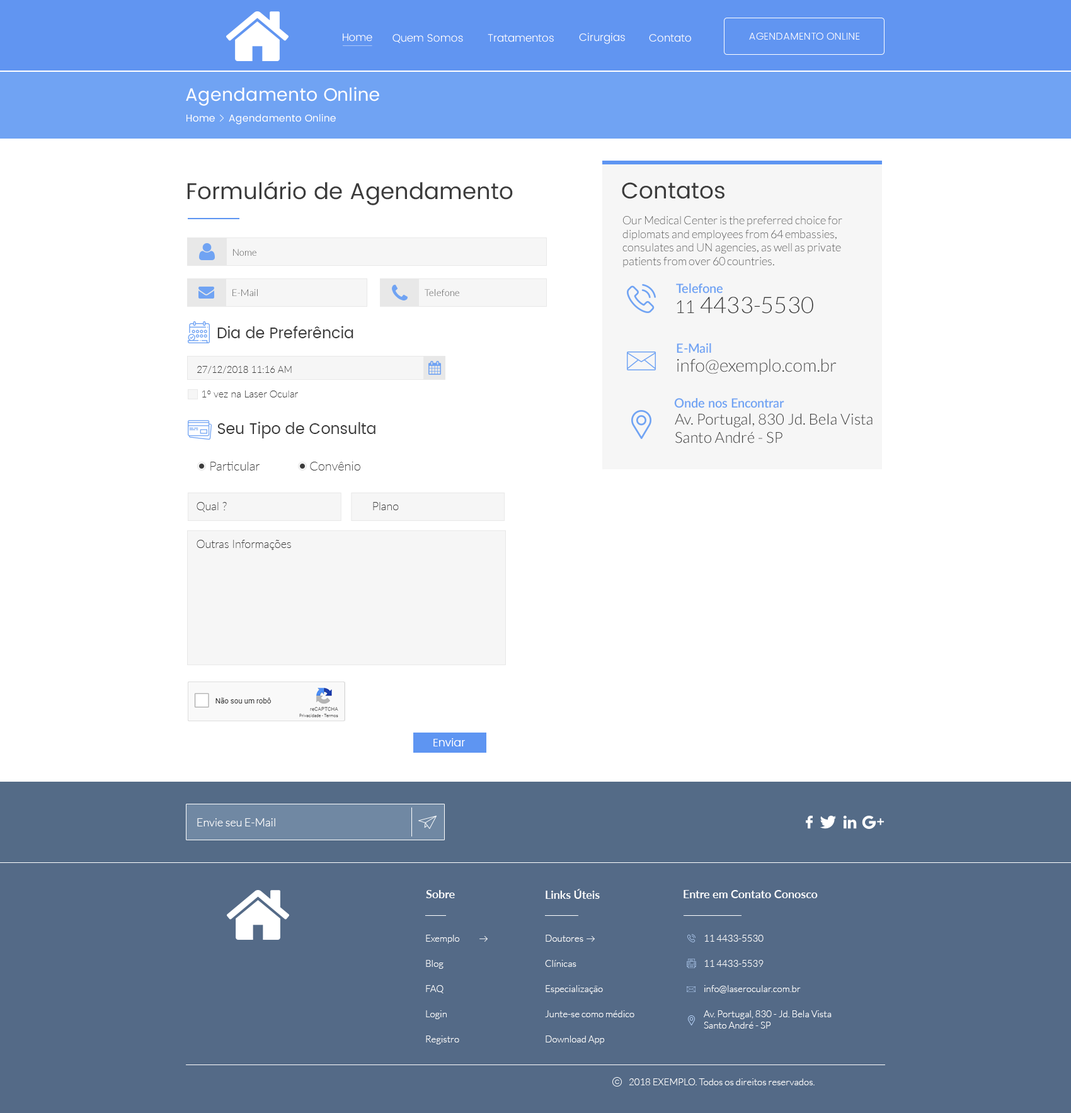
<style>
.page{position:relative;width:1071px;height:1113px;background:#ffffff}
.page>*{position:absolute;margin:0}
.t1{font:10.7px "Poppins-Light";letter-spacing:-0.015em;color:#ffffff}
.t2{font:10.7px "Poppins-Light";letter-spacing:-0.015em;color:#ffffff;text-transform:uppercase}
.t3{font:10.7px "Poppins-Light";color:#ffffff}
.t4{font:10.7px "Poppins-Light";color:#ffffff;text-transform:uppercase}
.t5{font:10.1px "Poppins-Light";color:#ffffff;text-transform:uppercase}
.t6{font:17.9px "Poppins-Regular";color:#ffffff}
.t7{font:9.9px "Poppins-Regular";color:#ffffff}
.t8{font:22.7px "Poppins-Regular";color:#3b3b3b}
.t9{font:11.3px "Lato-Light";color:#3b3b3b}
.t10{font:9.5px "Lato-Light"}
.t11{font:12.6px "Lato-Semibold";color:#70a3f3}
.t12{font:22.7px "Lato-Light";color:#3b3b3b}
.t13{font:17.6px "Lato-Light";color:#3b3b3b}
.t14{font:15.1px "Poppins-Regular";color:#3b3b3b}
.t15{font:9.5px "Lato-Thin";color:#3b3b3b}
.t16{font:10.1px "Lato-Thin";color:#3b3b3b}
.t17{font:15.1px "Lato-Light";color:#3b3b3b}
.t18{font:12.6px "Lato-Thin";color:#3b3b3b}
.t19{font:11.3px "Lato-Thin";color:#3b3b3b}
.t20{font:11.3px "Poppins-Light";color:#ffffff}
.t21{font:11.3px "Lato-Light";color:#ffffff}
.t22{font:11.3px "Lato-Semibold";color:#ffffff}
.t23{font:9.5px "Lato-Light";color:#ffffff}
</style>
<div class="page">
<p class="t1" style="left:343px;top:33px;width:29px;height:9px"><span class="t2">H</span>ome</p>
<p class="t3" style="left:393px;top:34px;width:70px;height:9px"><span class="t4">Q</span>uem Somos</p>
<p class="t3" style="left:488px;top:34px;width:66px;height:8px"><span class="t4">T</span>ratamentos</p>
<p class="t3" style="left:579px;top:33px;width:46px;height:11px"><span class="t4">C</span>irurgias</p>
<p class="t3" style="left:649px;top:34px;width:42px;height:8px">Contato</p>
<p class="t5" style="left:749px;top:32px;width:111px;height:8px">agendamento Online</p>
<p class="t6" style="left:186px;top:87px;width:193px;height:19px">Agendamento Online</p>
<p class="t7" style="left:186px;top:115px;width:29px;height:7px">Home</p>
<p class="t7" style="left:229px;top:114px;width:107px;height:11px">Agendamento Online</p>
<p class="t8" style="left:187px;top:181px;width:326px;height:24px">Formulário de Agendamento</p>
<p class="t8" style="left:622px;top:182px;width:103px;height:17px">Contatos</p>
<p class="t9" style="left:622px;top:216px;width:220px;height:52px">Our Medical Center is the preferred choice for diplomats and employees from 64 embassies, consulates and UN agencies, as well as private patients from over 60 countries.</p>
<p class="t10" style="left:233px;top:249px;width:23px;height:7px">Nome</p>
<p class="t10" style="left:232px;top:289px;width:26px;height:7px">E-Mail</p>
<p class="t10" style="left:425px;top:289px;width:34px;height:7px">Telefone</p>
<p class="t11" style="left:676px;top:284px;width:47px;height:10px">Telefone</p>
<p class="t12" style="left:677px;top:297px;width:136px;height:17px"><span class="t13">11 </span>4433-5530</p>
<p class="t14" style="left:217px;top:326px;width:136px;height:12px">Dia de Preferência</p>
<p class="t11" style="left:677px;top:343px;width:34px;height:10px">E-Mail</p>
<p class="t13" style="left:677px;top:358px;width:160px;height:17px">info@exemplo.com.br</p>
<p class="t15" style="left:197px;top:366px;width:95px;height:8px">27/12/2018 11:16 AM</p>
<p class="t16" style="left:202px;top:391px;width:96px;height:7px">1º vez na Laser Ocular</p>
<p class="t11" style="left:674px;top:398px;width:110px;height:10px">Onde nos Encontrar</p>
<p class="t17" style="left:675px;top:413px;width:198px;height:31px">Av. Portugal, 830 Jd. Bela Vista <br>Santo André - SP</p>
<p class="t14" style="left:217px;top:422px;width:159px;height:17px">Seu Tipo de Consulta</p>
<p class="t18" style="left:210px;top:462px;width:50px;height:9px">Particular</p>
<p class="t18" style="left:310px;top:462px;width:50px;height:9px">Convênio</p>
<p class="t19" style="left:197px;top:502px;width:30px;height:10px">Qual ?</p>
<p class="t19" style="left:373px;top:502px;width:26px;height:8px">Plano</p>
<p class="t19" style="left:197px;top:540px;width:94px;height:10px">Outras Informações</p>
<p class="t20" style="left:433px;top:738px;width:32px;height:9px">Enviar</p>
<p class="t21" style="left:197px;top:818px;width:78px;height:9px">Envie seu E-Mail</p>
<p class="t22" style="left:426px;top:890px;width:29px;height:8px">Sobre</p>
<p class="t22" style="left:546px;top:889px;width:54px;height:10px">Links Úteis</p>
<p class="t22" style="left:684px;top:890px;width:134px;height:8px">Entre em Contato Conosco</p>
<p class="t23" style="left:426px;top:935px;width:34px;height:9px">Exemplo</p>
<p class="t23" style="left:546px;top:935px;width:37px;height:7px">Doutores</p>
<p class="t23" style="left:704px;top:935px;width:60px;height:7px">11 4433-5530</p>
<p class="t23" style="left:426px;top:960px;width:18px;height:9px">Blog</p>
<p class="t23" style="left:545px;top:960px;width:31px;height:7px">Clínicas</p>
<p class="t23" style="left:704px;top:960px;width:60px;height:7px">11 4433-5539</p>
<p class="t23" style="left:426px;top:985px;width:18px;height:9px">FAQ</p>
<p class="t23" style="left:546px;top:985px;width:57px;height:9px">Especialização</p>
<p class="t23" style="left:704px;top:985px;width:97px;height:9px">info@laserocular.com.br</p>
<p class="t23" style="left:426px;top:1011px;width:21px;height:8px">Login</p>
<p class="t23" style="left:545px;top:1011px;width:89px;height:7px">Junte-se como médico</p>
<p class="t23" style="left:704px;top:1011px;width:128px;height:18px">Av. Portugal, 830 - Jd. Bela Vista <br>Santo André - SP</p>
<p class="t23" style="left:426px;top:1036px;width:33px;height:9px">Registro</p>
<p class="t23" style="left:546px;top:1036px;width:59px;height:9px">Download App</p>
<p class="t23" style="left:629px;top:1079px;width:186px;height:7px">2018 EXEMPLO. Todos os direitos reservados.</p>
</div>
